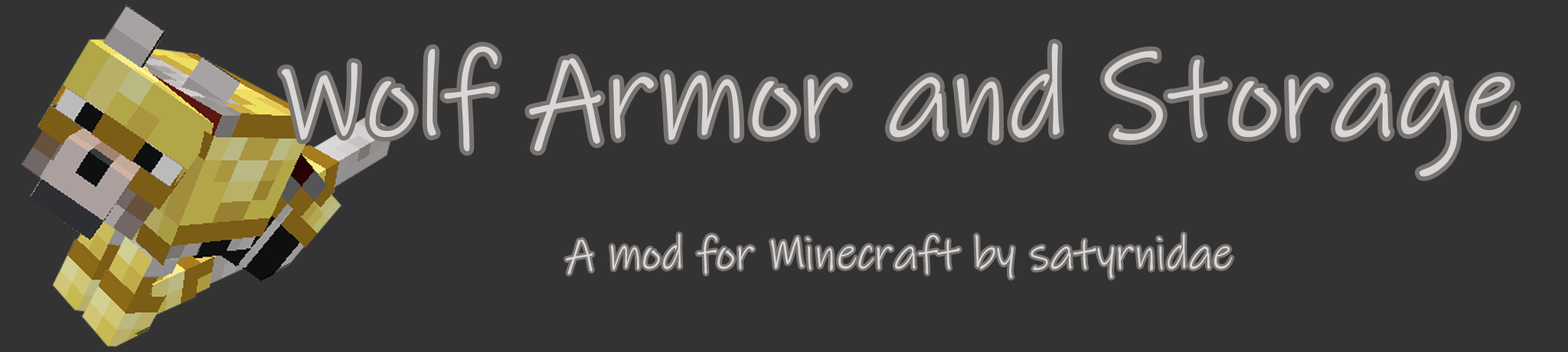
<style>
.page{position:relative;width:1568px;height:352px;background:#333333}
.page>*{position:absolute;margin:0}
.t1{font:122.5px "InkFree";color:#dbd7d8}
.t2{font:45.9px "InkFree";color:#dbd7d8}
</style>
<div class="page">
<p class="t1" style="left:282px;top:43px;width:1235px;height:134px">Wolf Armor and Storage</p>
<p class="t2" style="left:566px;top:234px;width:667px;height:45px">A mod for Minecraft by satyrnidae</p>
</div>
